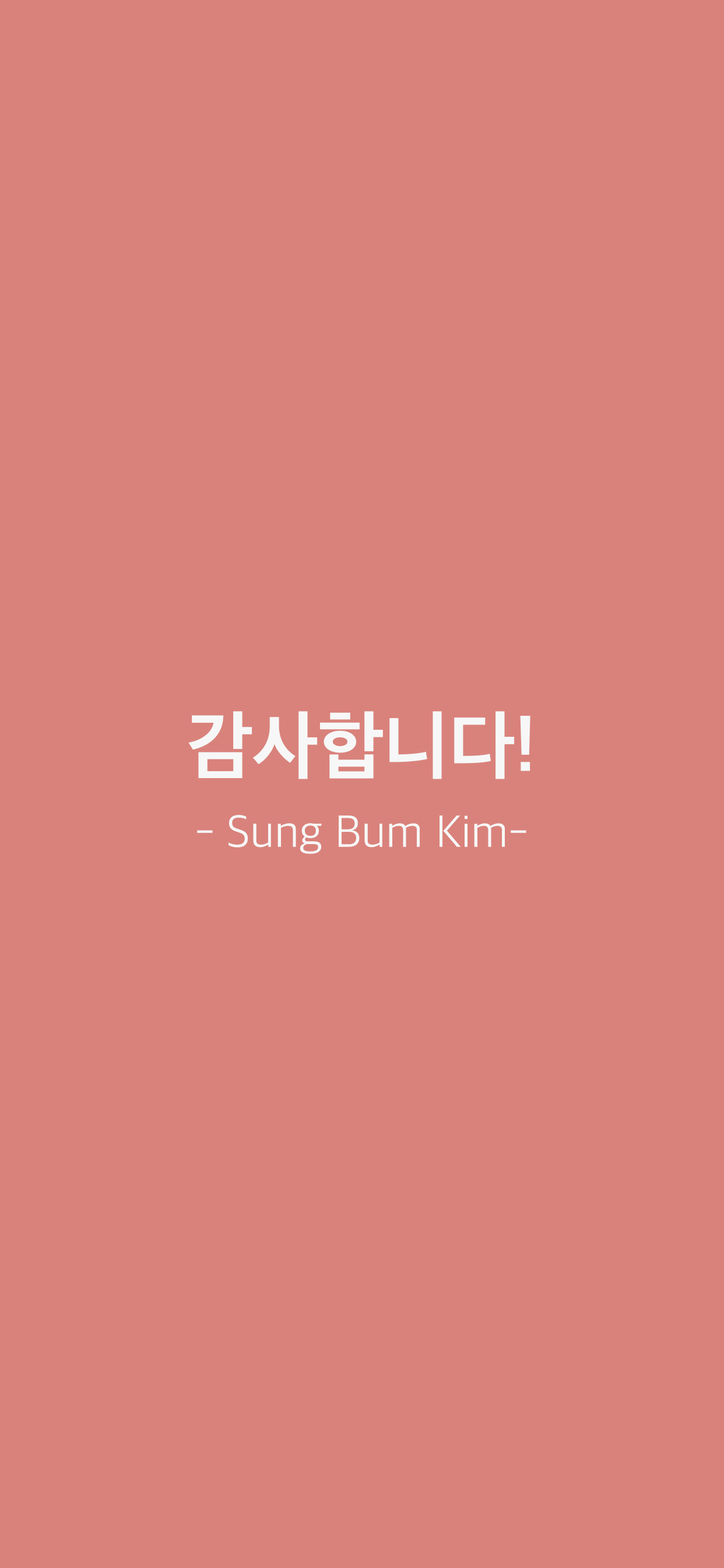
<style>
.page{position:relative;width:724px;height:1568px;background:#d9827b}
.page>*{position:absolute;margin:0}
.t1{font:46.7px/75.8px "AppleSDGothicNeo-Light";color:#f7f7f7}
.t2{font:75.8px/75.8px "AppleSDGothicNeo-Bold";color:#f7f7f7}
</style>
<div class="page">
<p class="t1" style="left:188px;top:711px;width:343px;height:143px;text-align:center"><span class="t2">감사합니다!<br></span>- Sung Bum Kim-</p>
</div>
